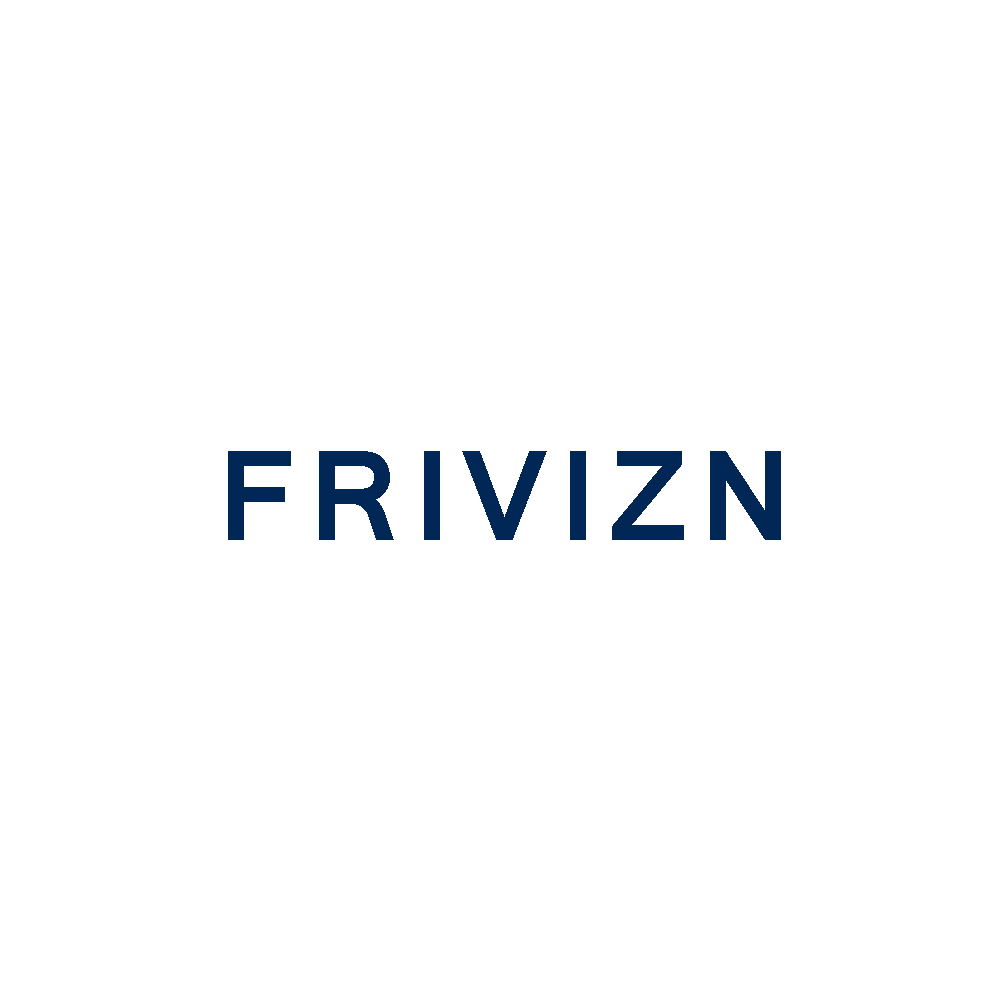
<style>
.page{position:relative;width:1000px;height:1000px;background:#ffffff}
.page>*{position:absolute;margin:0}
.t1{font:120px "Mangal-Bold";letter-spacing:0.1em;color:#002756;text-transform:uppercase}
</style>
<div class="page">
<p class="t1" style="left:228px;top:451px;width:553px;height:89px">frivizn</p>
</div>
